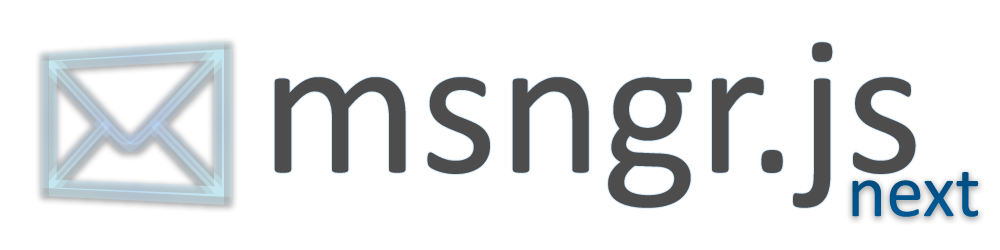
<style>
.page{position:relative;width:1000px;height:250px;background:#ffffff}
.page>*{position:absolute;margin:0}
.t1{font:200px "Calibri";color:#4d4d4d}
.t2{font:75px "Calibri";color:#00538a}
</style>
<div class="page">
<p class="t1" style="left:274px;top:42px;width:642px;height:166px">msngr.js</p>
<p class="t2" style="left:852px;top:172px;width:127px;height:45px">next</p>
</div>
